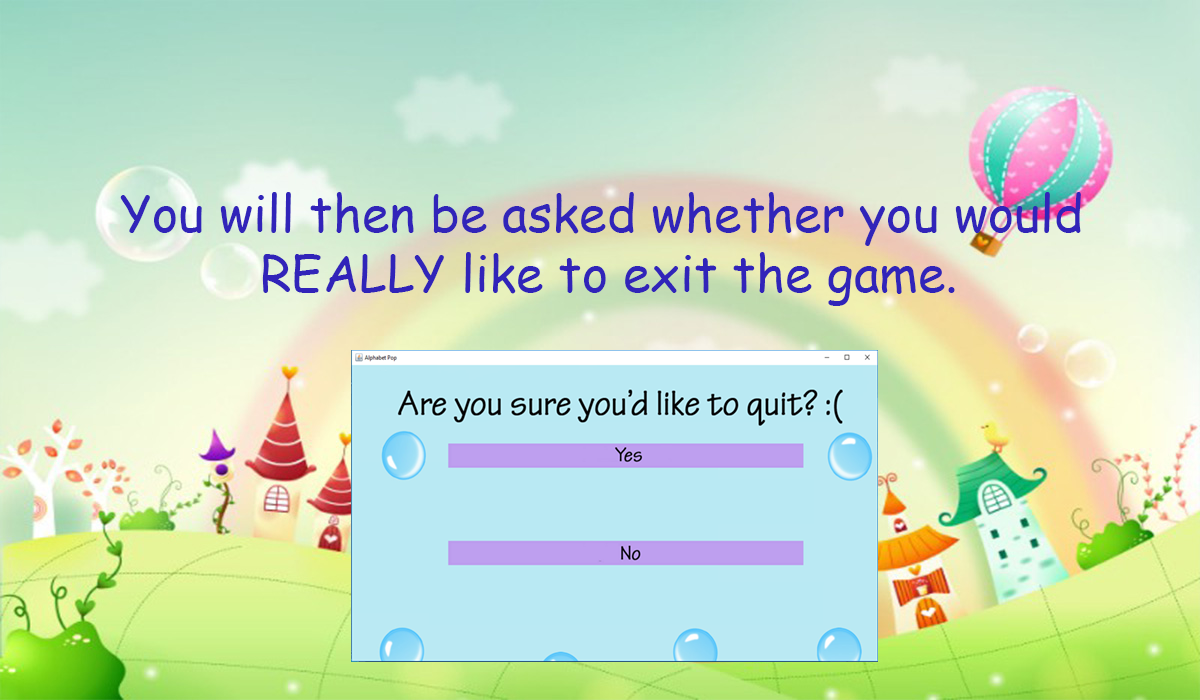
<style>
.page{position:relative;width:1200px;height:700px}
.page>*{position:absolute;margin:0}
.t1{font:12px "ComicSansMS";color:#3124b9}
</style>
<div class="page">
<p class="t1" style="left:120px;top:192px;width:961px;height:114px;text-align:center">You will then be asked whether you would <br>REALLY like to exit the game.</p>
</div>
